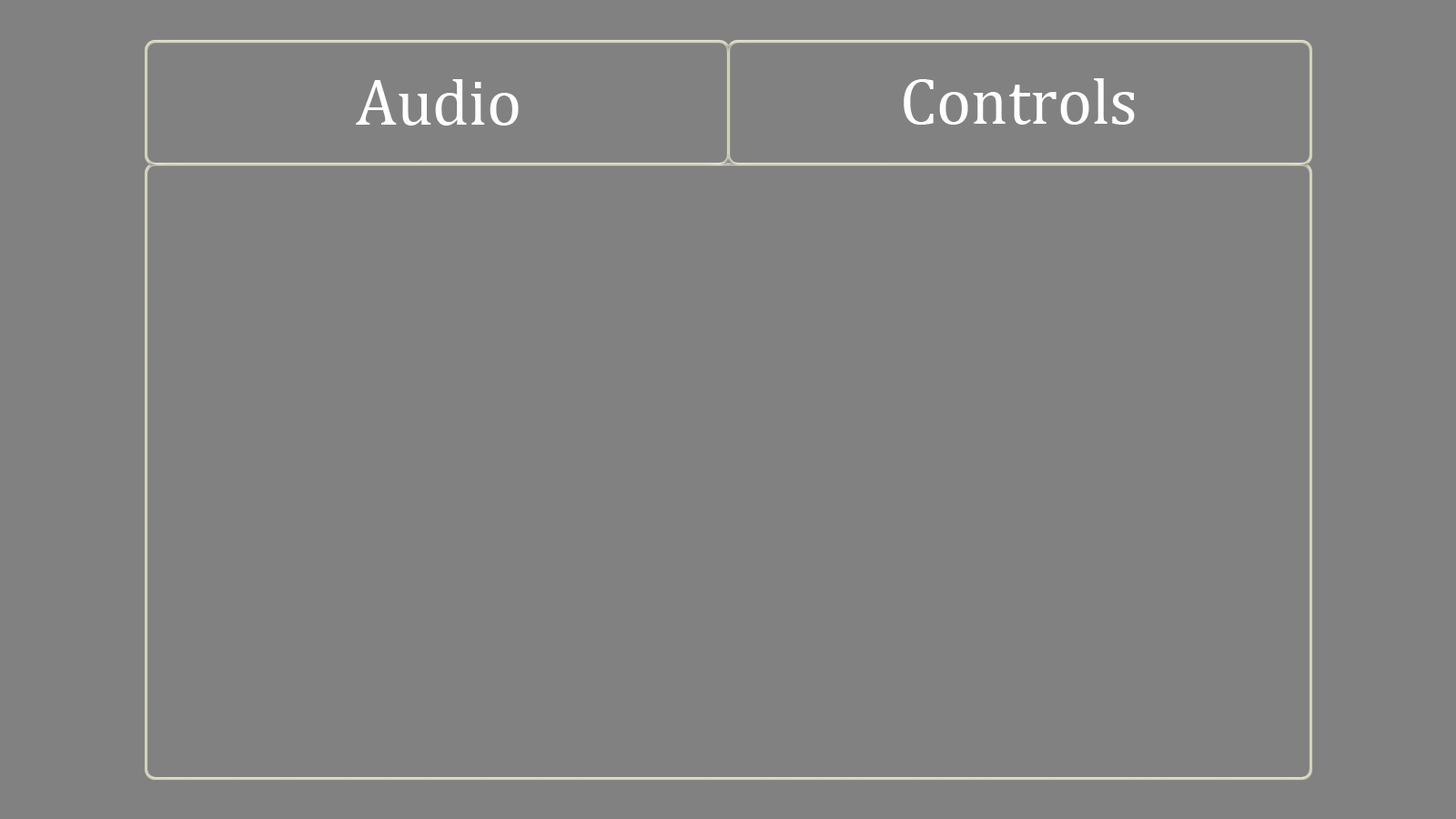
<style>
.page{position:relative;width:1456px;height:819px;background:#818181}
.page>*{position:absolute;margin:0}
.t1{font:65.5px "Cambria";color:#ffffff}
</style>
<div class="page">
<p class="t1" style="left:356px;top:79px;width:163px;height:47px">Audio</p>
<p class="t1" style="left:904px;top:78px;width:231px;height:47px">Controls</p>
</div>
